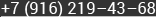
<style>
.page{position:relative;width:156px;height:17px;background:#333333}
.page>*{position:absolute;margin:0}
.t1{font:16px "Roboto-Regular";letter-spacing:0.025em;color:#ffffff;text-transform:uppercase;text-decoration:underline}
</style>
<div class="page">
<p class="t1" style="left:1px;top:1px;width:156px;height:17px">+7 (916) 219–43–68</p>
</div>
